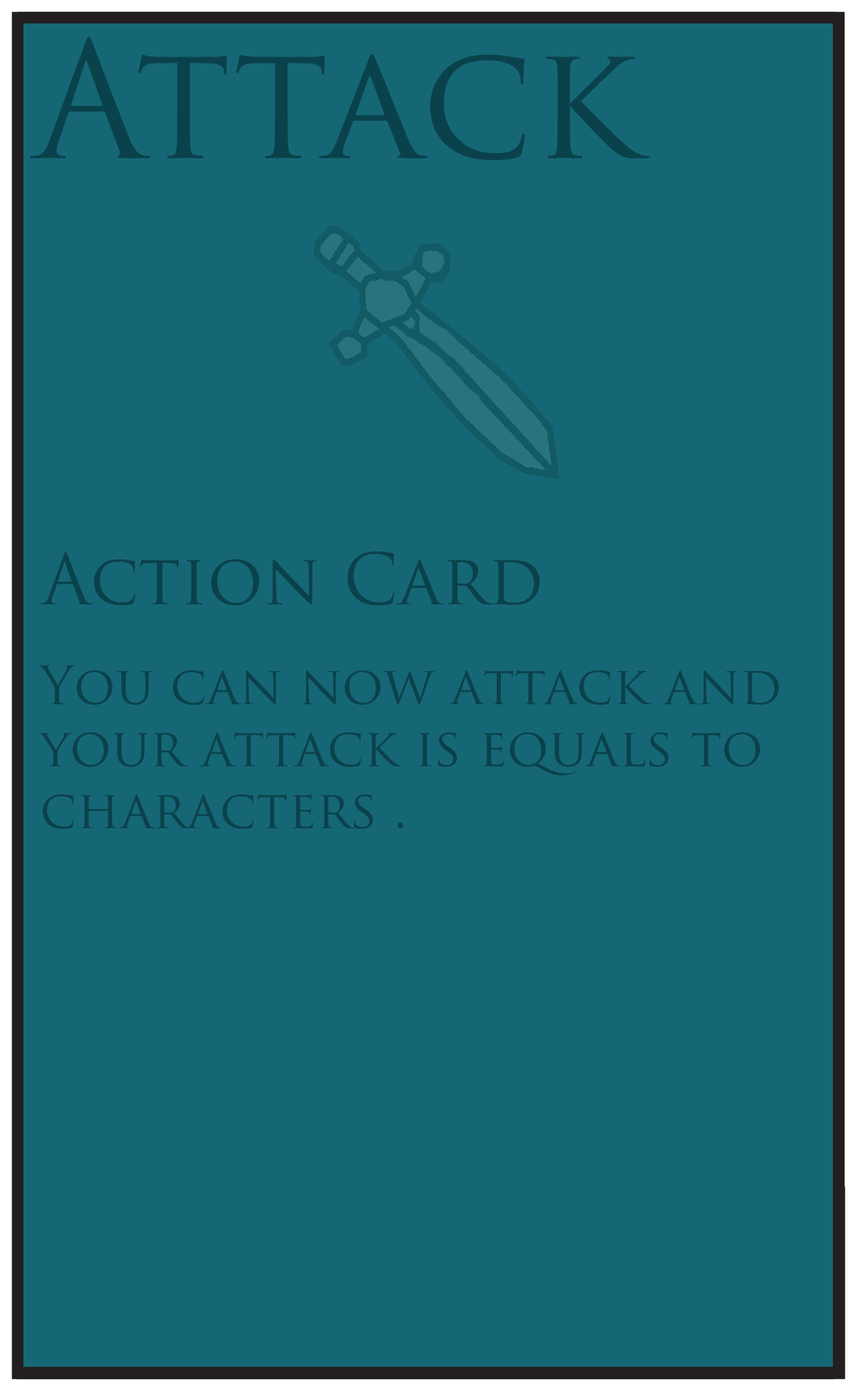
<style>
.page{position:relative;width:857px;height:1391px;background:#166776}
.page>*{position:absolute;margin:0}
.t1{font:157.9px "TrajanPro-Regular";color:#0a424c}
.t2{font:68.9px "TrajanPro-Regular";color:#0a424c}
.t3{font:51.7px "TrajanPro-Regular";color:#0a424c}
</style>
<div class="page">
<p class="t1" style="left:30px;top:37px;width:620px;height:124px">Attack</p>
<p class="t2" style="left:40px;top:551px;width:500px;height:55px">Action Card</p>
<p class="t3" style="left:38px;top:665px;width:741px;height:164px">You can now attack and <br>your attack is equals to <br>characters .</p>
</div>
